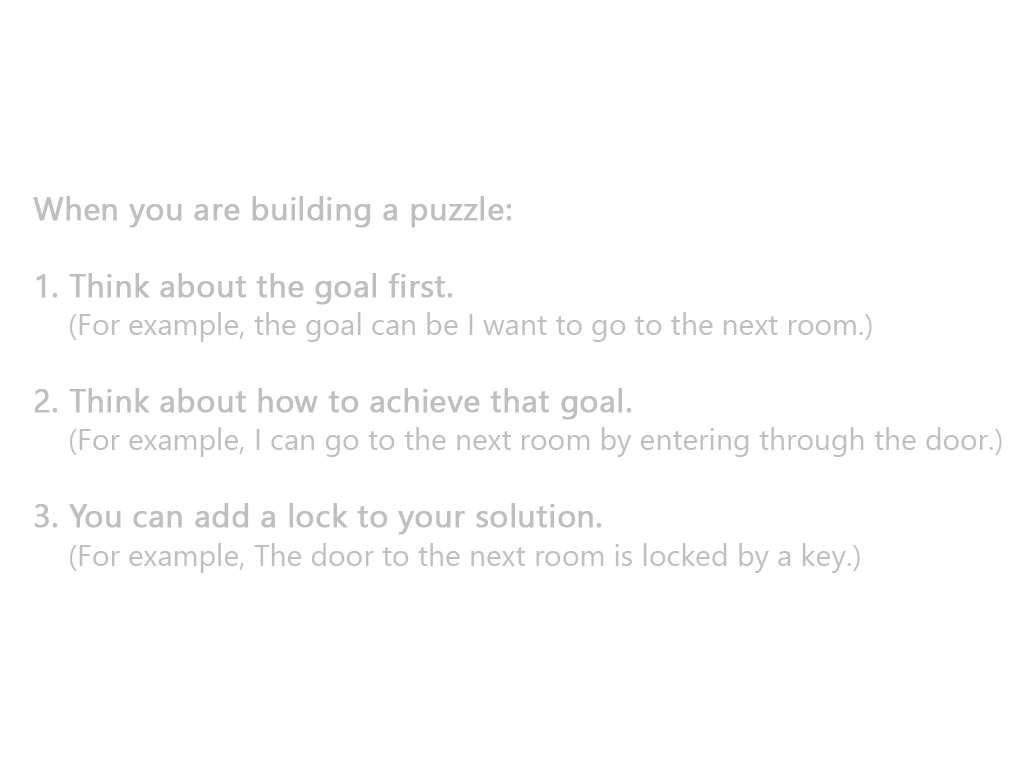
<style>
.page{position:relative;width:1024px;height:768px;background:#ffffff}
.page>*{position:absolute;margin:0}
.t1{font:30px "SegoeUI";color:#bfbfbf}
.t2{font:32px "SegoeUI";color:#bfbfbf;font-weight:bold}
</style>
<div class="page">
<p class="t1" style="left:33px;top:196px;width:969px;height:377px"><span class="t2">When you are building a puzzle:<br><br>1. Think about the goal first.<br>    </span>(For example, the goal can be I want to go to the next room.)<br><br><span class="t2">2. Think about how to achieve that goal.<br>    </span>(For example, I can go to the next room by entering through the door.)<br><br><span class="t2">3. You can add a lock to your solution.<br>    </span>(For example, The door to the next room is locked by a key.)</p>
</div>
